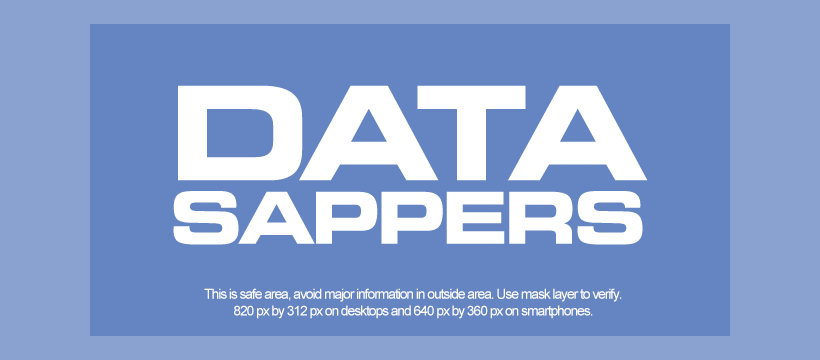
<style>
.page{position:relative;width:820px;height:360px;background:#6485c1}
.page>*{position:absolute;margin:0}
.t1{font:14px "ArialMT";letter-spacing:-0.08em;color:#fdfcfc}
</style>
<div class="page">
<p class="t1" style="left:204px;top:288px;width:418px;height:31px;text-align:center">This is safe area, avoid major information in outside area. Use mask layer to verify.<br>820 px by 312 px on desktops and 640 px by 360 px on smartphones.</p>
</div>
